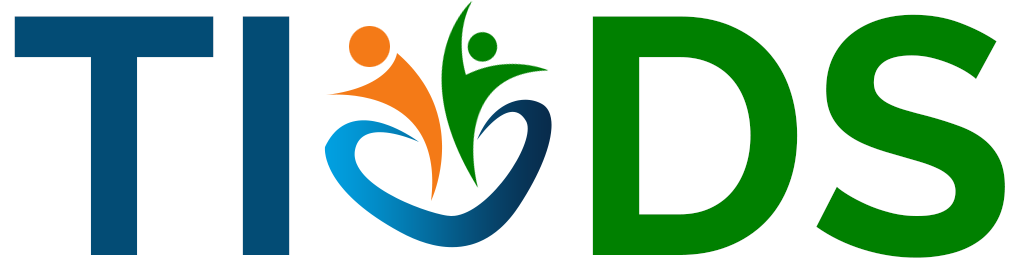
<style>
.page{position:relative;width:1015px;height:266px;background:#ffffff}
.page>*{position:absolute;margin:0}
.t1{font:336px "Raleway-Bold";color:#034c75}
.t2{font:336px "Raleway-Bold";color:#008000}
</style>
<div class="page">
<p class="t1" style="left:14px;top:16px;width:276px;height:239px">TI</p>
<p class="t2" style="left:592px;top:14px;width:413px;height:244px">DS</p>
</div>
